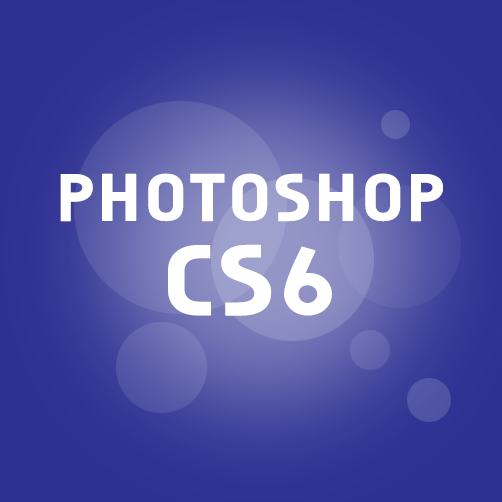
<style>
.page{position:relative;width:502px;height:502px}
.page>*{position:absolute;margin:0}
.t1{font:83.4px "ahn2006-B";color:#ffffff;font-weight:bold;scale:1.2 1}
.t2{font:125.1px "ahn2006-B";color:#ffffff;font-weight:bold;scale:1.2 1}
</style>
<div class="page">
<p class="t1" style="left:60px;top:173px;width:383px;height:49px">PHOTOSHOP</p>
<p class="t2" style="left:168px;top:244px;width:164px;height:72px">CS6</p>
</div>
